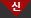
<style>
.page{position:relative;width:31px;height:18px;background:#333333}
.page>*{position:absolute;margin:0}
.t1{font:9.6px "NanumGothicBold";color:#ffffff}
</style>
<div class="page">
<p class="t1" style="left:11px;top:2px;width:10px;height:9px">신</p>
</div>
